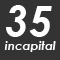
<style>
.page{position:relative;width:60px;height:60px;background:#333333}
.page>*{position:absolute;margin:0}
.t1{font:42px "CenturyGothic-BoldItalic";color:#ffffff}
.t2{font:12px "CenturyGothic-BoldItalic";color:#ffffff}
</style>
<div class="page">
<p class="t1" style="left:6px;top:5px;width:46px;height:32px">35</p>
<p class="t2" style="left:4px;top:41px;width:52px;height:11px">incapital</p>
</div>
